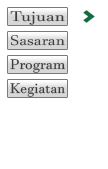
<style>
.page{position:relative;width:108px;height:169px;background:#ffffff}
.page>*{position:absolute;margin:0}
.t1{font:13.8px "JavaneseText";color:#3a3d3c;scale:1.32 1}
.t2{font:13.8px "JavaneseText";color:#3a3d3c;scale:1.2 1}
.t3{font:13.8px "JavaneseText";color:#3a3d3c;scale:1.09 1}
.t4{font:13.8px "JavaneseText";color:#3a3d3c;scale:1.04 1}
</style>
<div class="page">
<p class="t1" style="left:10px;top:11px;width:55px;height:14px">Tujuan</p>
<p class="t2" style="left:10px;top:34px;width:55px;height:12px">Sasaran</p>
<p class="t3" style="left:10px;top:59px;width:56px;height:14px">Program</p>
<p class="t4" style="left:10px;top:83px;width:55px;height:14px">Kegiatan</p>
</div>
